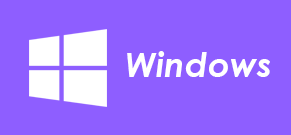
<style>
.page{position:relative;width:291px;height:135px;background:#8e5eff}
.page>*{position:absolute;margin:0}
.t1{font:34.5px "CenturyGothic-BoldItalic";color:#ffffff}
</style>
<div class="page">
<p class="t1" style="left:127px;top:51px;width:143px;height:26px">Windows</p>
</div>
